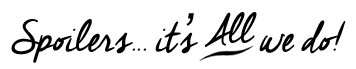
<style>
.page{position:relative;width:356px;height:69px;background:#ffffff}
.page>*{position:absolute;margin:0}
.t1{font:52.4px "CheddarJack";color:#000000;font-style:italic}
.t2{font:52.4px "ArialMT";color:#000000;font-style:italic}
.t3{font:51.1px "CheddarJack";color:#000000;font-style:italic}
</style>
<div class="page">
<p class="t1" style="left:11px;top:13px;width:335px;height:50px">Spoilers... it<span class="t2">’</span>s        we do!</p>
<p class="t3" style="left:204px;top:12px;width:53px;height:35px">All</p>
</div>
